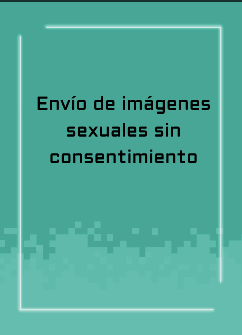
<style>
.page{position:relative;width:242px;height:335px;background:#47a696}
.page>*{position:absolute;margin:0}
.t1{font:18.7px/26.7px "Aldrich-Regular";letter-spacing:0.005em;color:#000000}
</style>
<div class="page">
<p class="t1" style="left:37px;top:96px;width:173px;height:68px;text-align:center">Envío de imágenes<br>sexuales sin<br>consentimiento</p>
</div>
